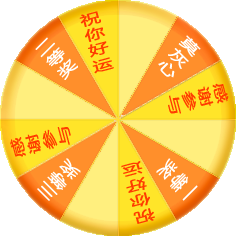
<style>
.page{position:relative;width:236px;height:236px;background:#ffffff}
.page>*{position:absolute;margin:0}
.t1{font:13.3px/16px "MicrosoftYaHei";color:#ff3c00;font-weight:bold;scale:1.52 1}
.t2{font:13.3px/16px "MicrosoftYaHei";color:#ffffff;font-weight:bold;scale:1.52 1}
</style>
<div class="page">
<p class="t1" style="left:79px;top:11px;width:35px;height:63px;text-align:right;rotate:-15deg">祝<br>你<br>好<br>运</p>
<p class="t2" style="left:35px;top:37px;width:43px;height:43px;text-align:right;rotate:-45deg">二<br>等<br>奖</p>
<p class="t2" style="left:158px;top:35px;width:43px;height:43px;text-align:right;rotate:45deg">莫<br>灰<br>心</p>
<p class="t1" style="left:168px;top:83px;width:61px;height:31px;text-align:right;rotate:75deg">感<br>谢<br>参<br>与</p>
<p class="t1" style="left:10px;top:127px;width:61px;height:30px;text-align:right;rotate:-105deg">感<br>谢<br>参<br>与</p>
<p class="t2" style="left:37px;top:158px;width:44px;height:43px;text-align:right;rotate:-135deg">三<br>等<br>奖</p>
<p class="t1" style="left:121px;top:161px;width:34px;height:63px;text-align:right;rotate:165deg">祝<br>你<br>好<br>运</p>
<p class="t2" style="left:156px;top:158px;width:42px;height:43px;text-align:right;rotate:135deg">一<br>等<br>奖</p>
</div>
